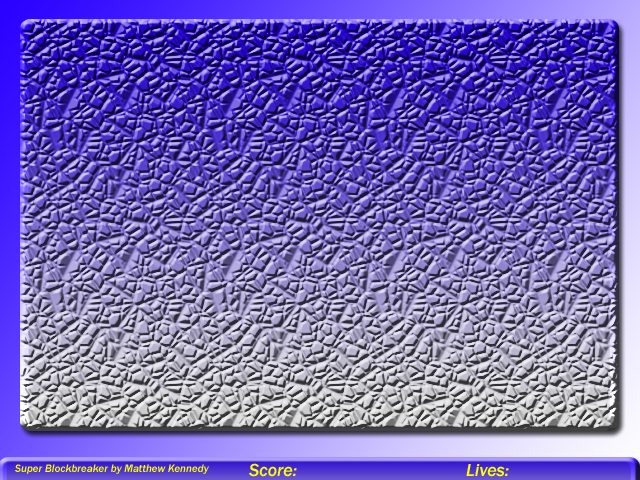
<style>
.page{position:relative;width:640px;height:480px}
.page>*{position:absolute;margin:0}
.t1{font:11px "FranklinGothic-MediumItalic";color:#fcff00}
.t2{font:18px "FranklinGothic-MediumItalic";color:#fcff00}
</style>
<div class="page">
<p class="t1" style="left:15px;top:464px;width:194px;height:10px">Super Blockbreaker by Matthew Kennedy</p>
<p class="t2" style="left:249px;top:463px;width:48px;height:14px">Score:</p>
<p class="t2" style="left:466px;top:464px;width:43px;height:13px">Lives:</p>
</div>
